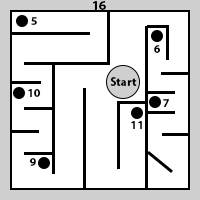
<style>
.page{position:relative;width:200px;height:200px;background:#ffffff}
.page>*{position:absolute;margin:0}
.t1{font:13px "MyriadPro-Bold";color:#000000}
.t2{font:12px "MyriadPro-Bold";color:#000000}
</style>
<div class="page">
<p class="t1" style="left:93px;top:1px;width:13px;height:9px">16</p>
<p class="t2" style="left:31px;top:17px;width:6px;height:8px">5</p>
<p class="t2" style="left:154px;top:45px;width:7px;height:8px">6</p>
<p class="t2" style="left:110px;top:77px;width:27px;height:9px">Start</p>
<p class="t2" style="left:28px;top:89px;width:13px;height:8px">10</p>
<p class="t2" style="left:163px;top:99px;width:6px;height:8px">7</p>
<p class="t2" style="left:131px;top:121px;width:11px;height:8px">11</p>
<p class="t2" style="left:29px;top:158px;width:7px;height:8px">9</p>
</div>
